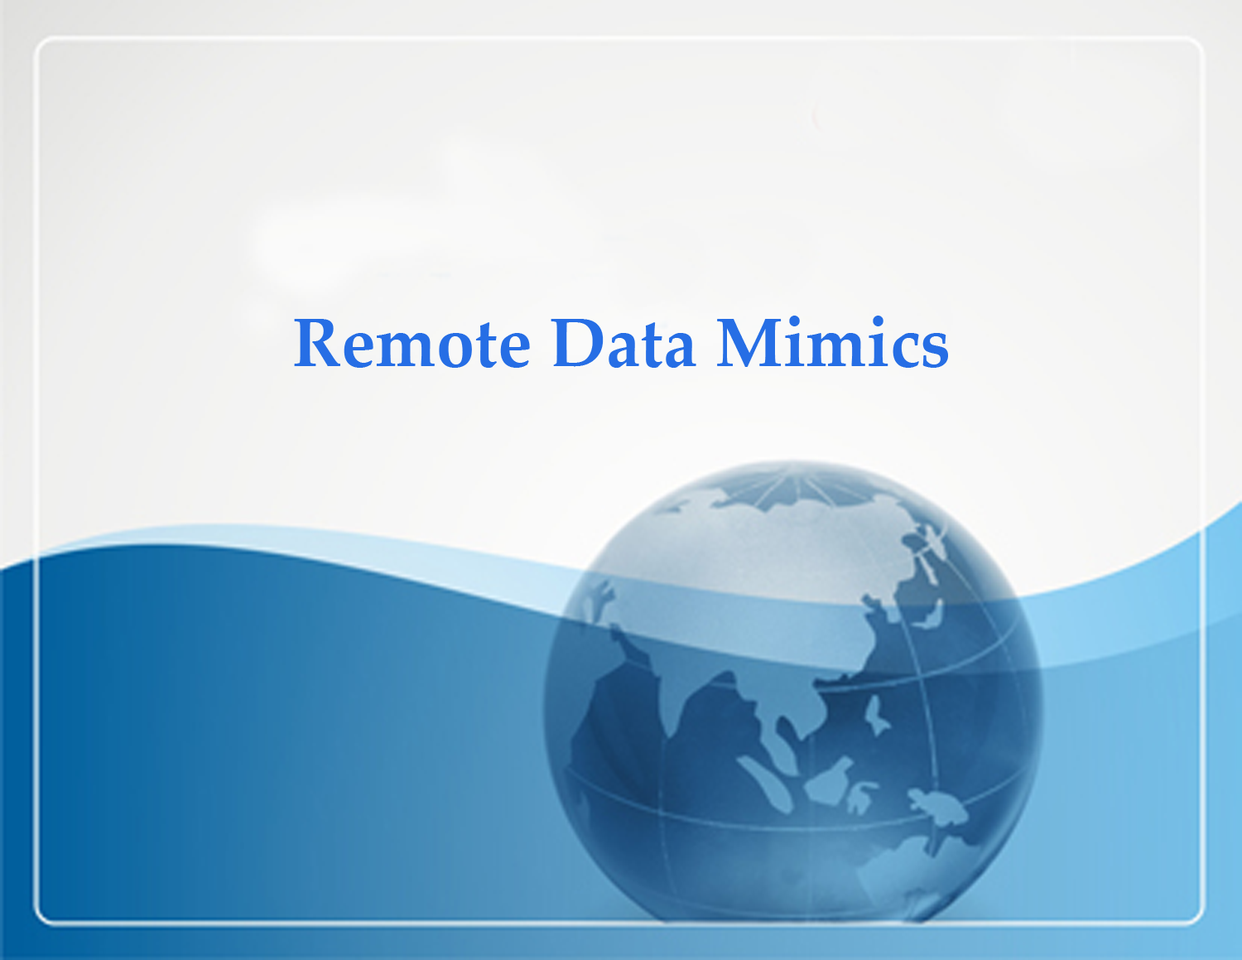
<style>
.page{position:relative;width:1242px;height:960px}
.page>*{position:absolute;margin:0}
.t1{font:68.6px "PalatinoLinotype-Bold";color:#266ee5}
</style>
<div class="page">
<p class="t1" style="left:294px;top:316px;width:654px;height:52px">Remote Data Mimics</p>
</div>
